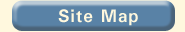
<style>
.page{position:relative;width:185px;height:32px;background:#5982a6}
.page>*{position:absolute;margin:0}
.t1{font:18px "Univers-Bold";letter-spacing:0.05em;color:#fff8de}
</style>
<div class="page">
<p class="t1" style="left:58px;top:9px;width:80px;height:17px">Site Map</p>
</div>
